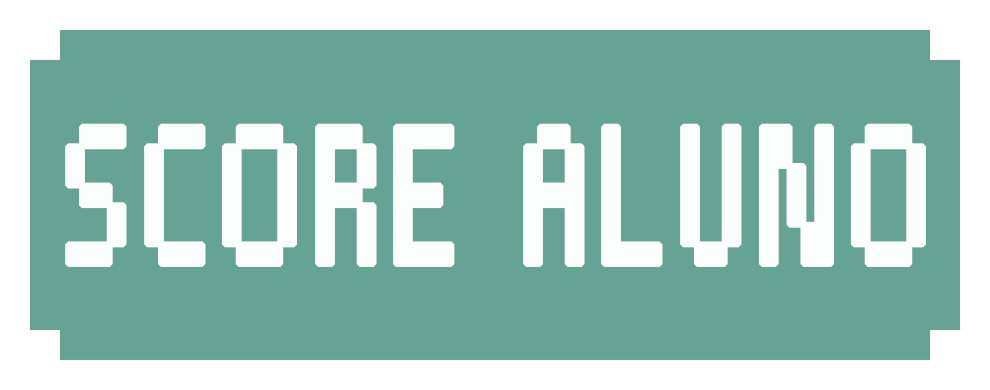
<style>
.page{position:relative;width:990px;height:390px;background:#65a394}
.page>*{position:absolute;margin:0}
.t1{font:255px "Pixelade";letter-spacing:0.025em;color:#fcfefe;font-weight:bold;scale:0.71 1}
</style>
<div class="page">
<p class="t1" style="left:65px;top:123px;width:861px;height:144px">SCORE ALUNO</p>
</div>
